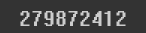
<style>
.page{position:relative;width:146px;height:33px;background:#333333}
.page>*{position:absolute;margin:0}
.t1{font:24px "System";color:#cccccc}
</style>
<div class="page">
<p class="t1" style="left:20px;top:11px;width:106px;height:15px">279872412</p>
</div>
